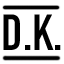
<style>
.page{position:relative;width:64px;height:64px;background:#ffffff}
.page>*{position:absolute;margin:0}
.t1{font:50px "DINCondensed-Bold";color:#000000}
</style>
<div class="page">
<p class="t1" style="left:3px;top:14px;width:58px;height:36px">D.K.</p>
</div>
